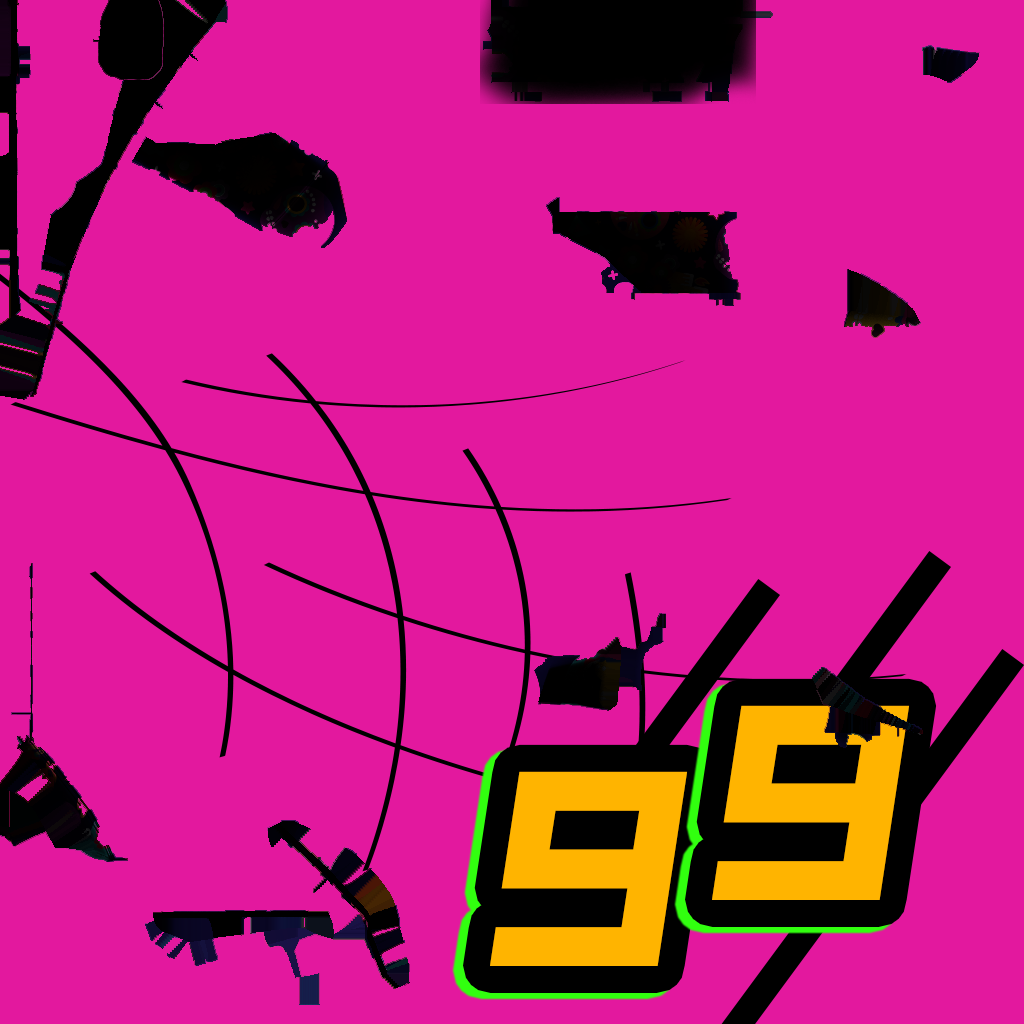
<style>
.page{position:relative;width:1024px;height:1024px;background:#e3189e}
.page>*{position:absolute;margin:0}
.t1{font:264.9px "SlopeOpera";color:#ffb400;scale:1.08 1}
</style>
<div class="page">
<p class="t1" style="left:712px;top:705px;width:198px;height:195px">9</p>
<p class="t1" style="left:490px;top:771px;width:198px;height:195px">9</p>
</div>
